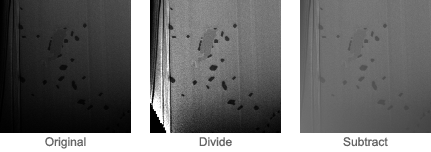
<style>
.page{position:relative;width:431px;height:152px;background:#ffffff}
.page>*{position:absolute;margin:0}
.t1{font:12px "ArialMT";color:#646464}
</style>
<div class="page">
<p class="t1" style="left:45px;top:137px;width:41px;height:12px">Original</p>
<p class="t1" style="left:199px;top:137px;width:33px;height:10px">Divide</p>
<p class="t1" style="left:343px;top:137px;width:45px;height:10px">Subtract</p>
</div>
